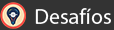
<style>
.page{position:relative;width:114px;height:30px;background:#333333}
.page>*{position:absolute;margin:0}
.t1{font:22px "MyriadPro-Regular";color:#ffffff}
</style>
<div class="page">
<p class="t1" style="left:35px;top:8px;width:76px;height:16px">Desafíos</p>
</div>
